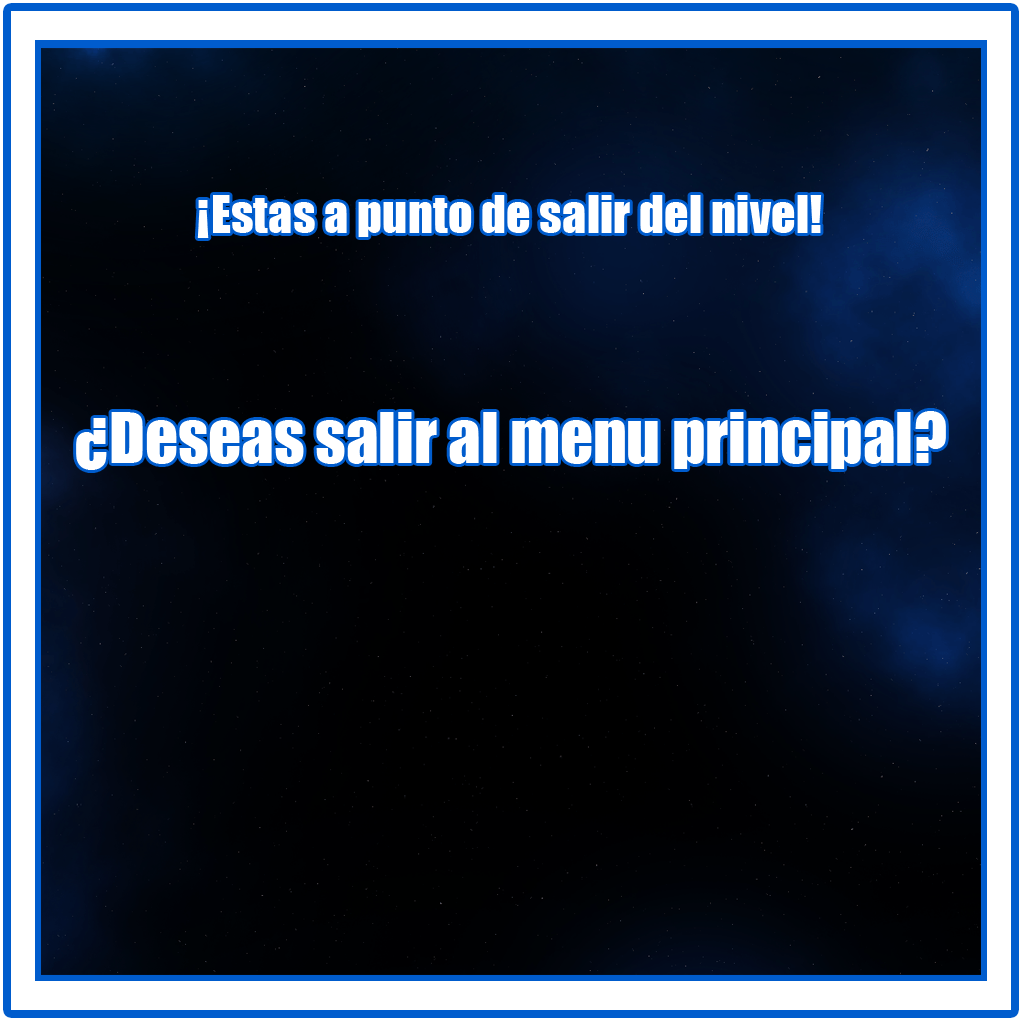
<style>
.page{position:relative;width:1024px;height:1024px}
.page>*{position:absolute;margin:0}
.t1{font:48.5px "Impact";color:#ffffff}
.t2{font:64.6px "Impact";color:#ffffff}
</style>
<div class="page">
<p class="t1" style="left:197px;top:195px;width:625px;height:43px">¡Estas a punto de salir del nivel!</p>
<p class="t2" style="left:76px;top:411px;width:870px;height:59px">¿Deseas salir al menu principal?</p>
</div>
